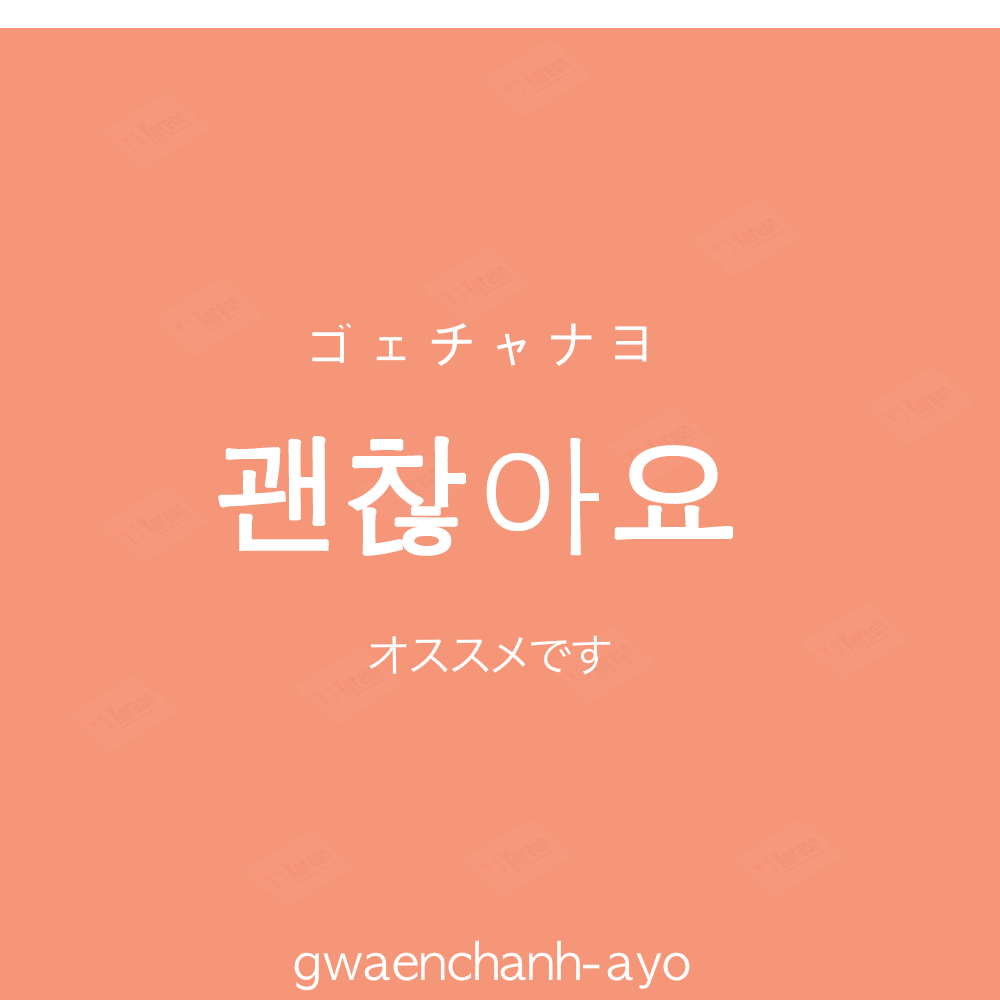
<style>
.page{position:relative;width:1000px;height:1000px;background:#f69679}
.page>*{position:absolute;margin:0}
.t1{font:60px "AppleGothic";color:#ffffff}
.t2{font:130px "AppleGothic";color:#ffffff;font-weight:bold}
.t3{font:45px "HiraKakuProN-W3";color:#ffffff}
.t4{font:50px "AppleGothic";color:#ffffff}
</style>
<div class="page">
<p class="t1" style="left:312px;top:323px;width:335px;height:43px">ゴェチャナヨ</p>
<p class="t2" style="left:218px;top:436px;width:515px;height:120px">괜찮아요</p>
<p class="t3" style="left:369px;top:635px;width:242px;height:40px">オススメです</p>
<p class="t4" style="left:294px;top:940px;width:396px;height:51px">gwaenchanh-ayo</p>
</div>
